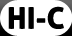
<style>
.page{position:relative;width:72px;height:36px;background:#ffffff}
.page>*{position:absolute;margin:0}
.t1{font:30px "AllerDisplay";color:#000000}
</style>
<div class="page">
<p class="t1" style="left:8px;top:6px;width:56px;height:23px">HI-C</p>
</div>
